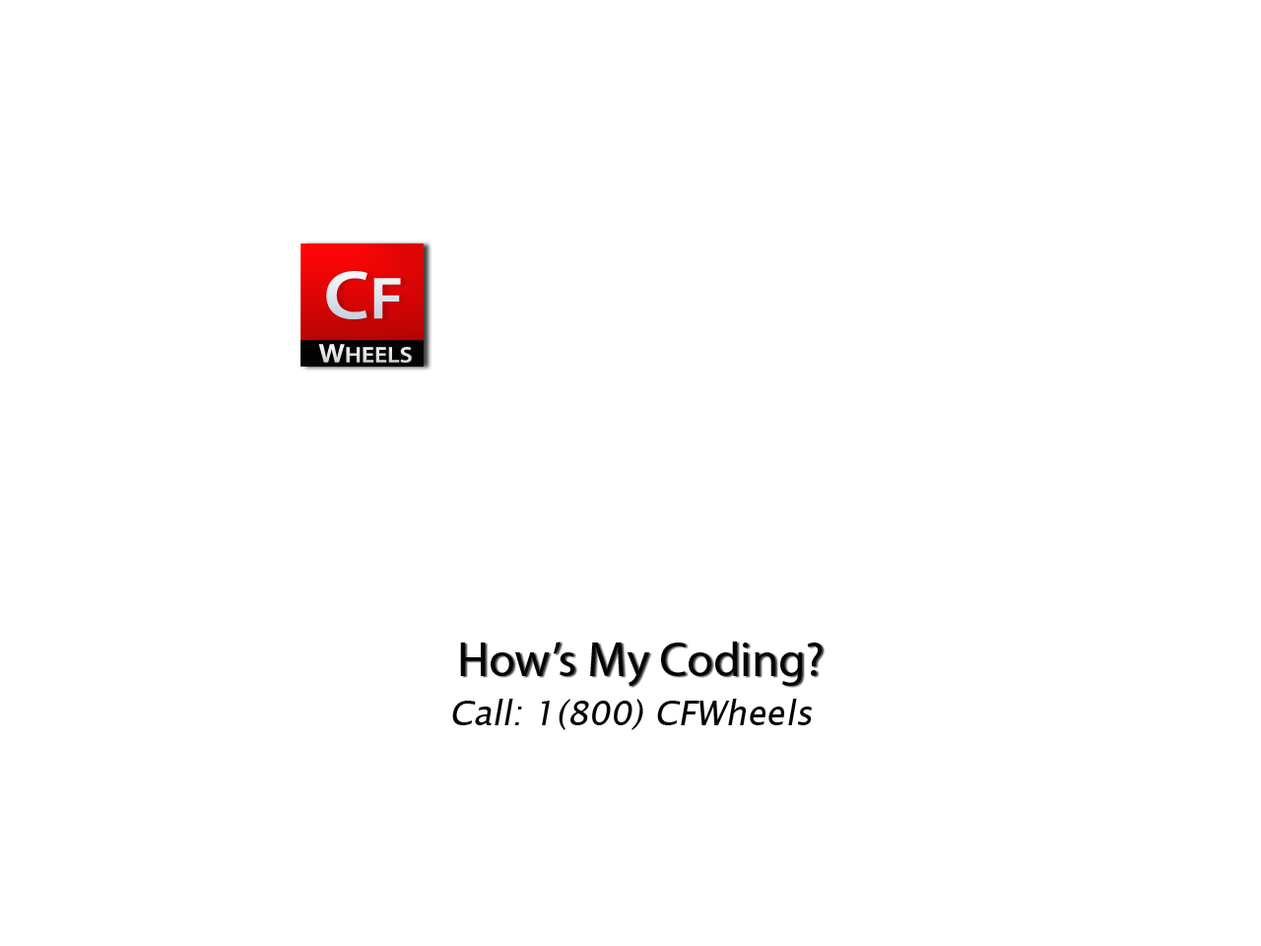
<style>
.page{position:relative;width:1261px;height:946px;background:#ffffff}
.page>*{position:absolute;margin:0}
.t1{font:69.1px "MyriadPro-Semibold";color:#dee3eb;scale:1.12 1}
.t2{font:59.5px "MyriadPro-Semibold";color:#dee3eb;scale:1.12 1}
.t3{font:22.3px "MyriadPro-Semibold";color:#e3e2e2;scale:1.12 1}
.t4{font:26.7px "MyriadPro-Semibold";color:#e3e2e2;scale:1.12 1}
.t5{font:48.2px "MyriadPro-Regular";color:#040404}
.t6{font:34.4px "LucidaSansUnicode";color:#040404;font-style:italic}
</style>
<div class="page">
<p class="t1" style="left:326px;top:271px;width:75px;height:48px">C<span class="t2">F</span></p>
<p class="t3" style="left:318px;top:344px;width:94px;height:19px"><span class="t4">W</span>HEELS</p>
<p class="t5" style="left:460px;top:641px;width:363px;height:46px">How’s My Coding?</p>
<p class="t6" style="left:452px;top:698px;width:360px;height:32px">Call: 1(800) CFWheels</p>
</div>
